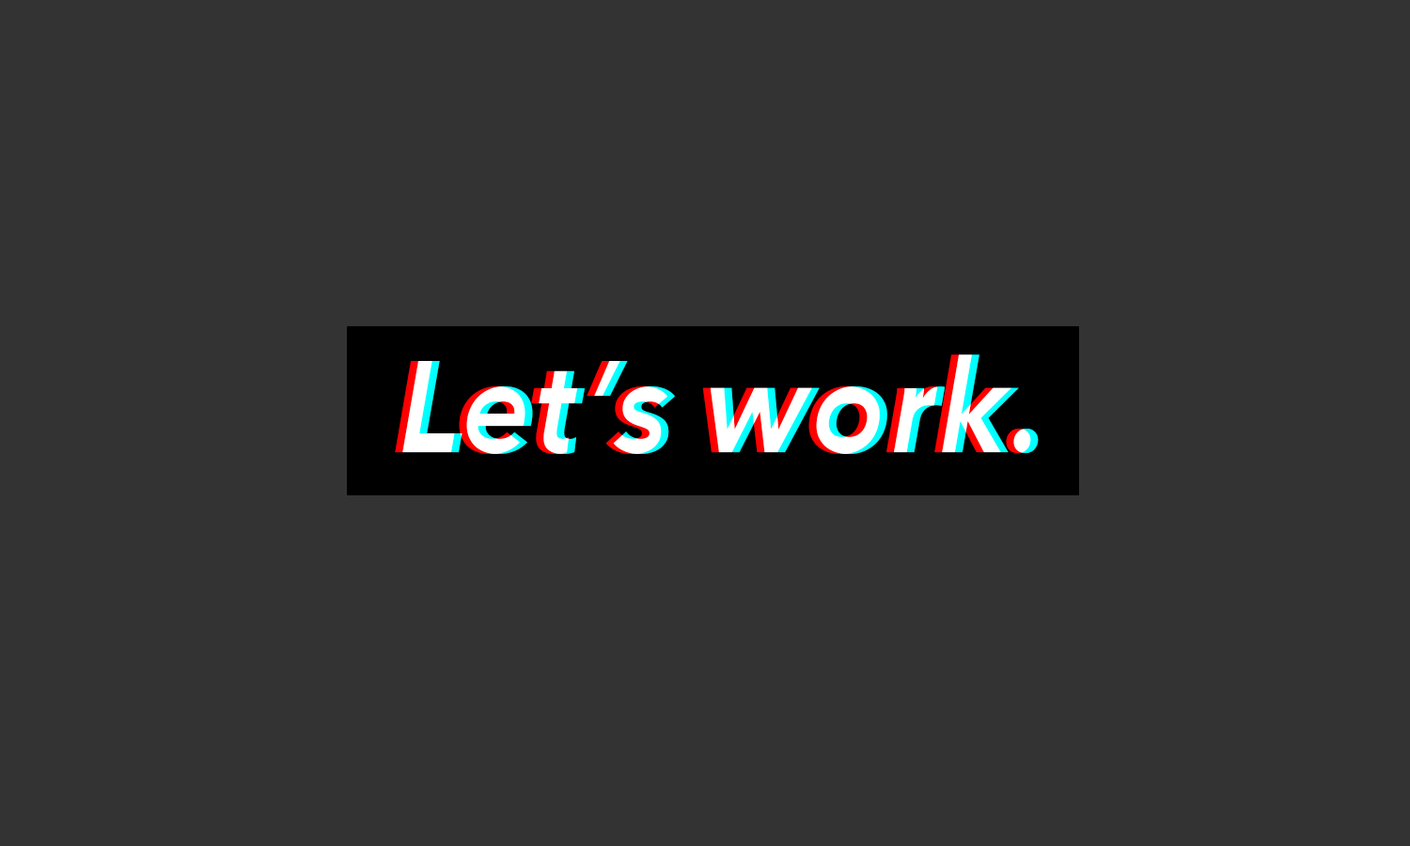
<style>
.page{position:relative;width:1410px;height:846px;background:#333333}
.page>*{position:absolute;margin:0}
.t1{font:128.6px "AvenirNext-BoldItalic";color:#ffffff}
</style>
<div class="page">
<p class="t1" style="left:395px;top:354px;width:636px;height:100px">Let’s work.</p>
<p class="t1" style="left:402px;top:354px;width:637px;height:100px">Let’s work.</p>
</div>
